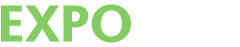
<style>
.page{position:relative;width:240px;height:47px;background:#ffffff}
.page>*{position:absolute;margin:0}
.t1{font:54px "FaberSansPro-Schwer";color:#84cb61}
</style>
<div class="page">
<p class="t1" style="left:1px;top:4px;width:130px;height:39px">EXPO</p>
</div>
